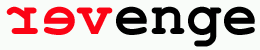
<style>
.page{position:relative;width:260px;height:50px;background:#f9fcf9}
.page>*{position:absolute;margin:0}
.t1{font:59.8px "CourierNewPS-BoldMT";color:#fb0314}
.t2{font:59.8px "CourierNewPS-BoldMT";color:#000000}
</style>
<div class="page">
<p class="t1" style="left:6px;top:6px;width:107px;height:29px;rotate:180deg">ver</p>
<p class="t2" style="left:116px;top:6px;width:139px;height:41px">enge</p>
</div>
